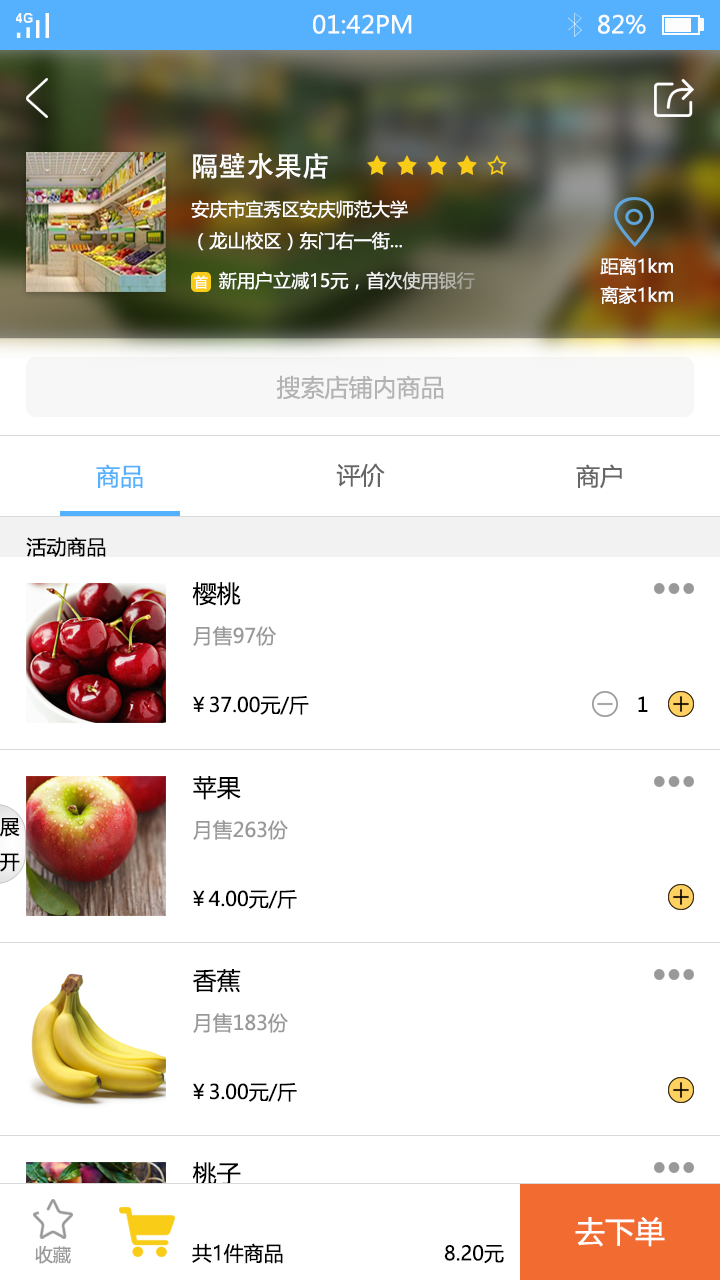
<style>
.page{position:relative;width:720px;height:1280px;background:#ffffff}
.page>*{position:absolute;margin:0}
.t1{font:24px "MicrosoftYaHei";color:#fbfdfc}
.t2{font:27.7px "AdobeHeitiStd-Regular";color:#ffffff}
.t3{font:18px "MicrosoftYaHei";color:#ffffff}
.t4{font:18.1px "MicrosoftYaHei";color:#ffffff}
.t5{font:13.8px "MicrosoftYaHei";color:#ffffff}
.t6{font:24px "MicrosoftYaHei";color:#b3b3b3}
.t7{font:24px "MicrosoftYaHei";color:#55b0fe}
.t8{font:24px "MicrosoftYaHei";color:#666666}
.t9{font:20px "MicrosoftYaHei";color:#010101}
.t10{font:24px "MicrosoftYaHei";color:#000000}
.t11{font:20px "MicrosoftYaHei";color:#999999}
.t12{font:20px "MicrosoftYaHei";color:#000000}
.t13{font:30px "MicrosoftYaHei";color:#ffffff}
.t14{font:17.9px "MicrosoftYaHei";color:#999999}
</style>
<div class="page">
<p class="t1" style="left:313px;top:14px;width:99px;height:20px">01:42PM</p>
<p class="t1" style="left:598px;top:14px;width:48px;height:20px">82%</p>
<p class="t2" style="left:193px;top:153px;width:135px;height:26px">隔壁水果店</p>
<p class="t3" style="left:191px;top:200px;width:217px;height:51px">安庆市宜秀区安庆师范大学<br>（龙山校区）东门右一街...</p>
<p class="t4" style="left:600px;top:257px;width:73px;height:18px">距离1km</p>
<p class="t5" style="left:194px;top:275px;width:14px;height:14px">首</p>
<p class="t3" style="left:219px;top:271px;width:256px;height:19px">新用户立减15元，首次使用银行</p>
<p class="t4" style="left:600px;top:286px;width:73px;height:18px">离家1km</p>
<p class="t6" style="left:277px;top:375px;width:167px;height:25px">搜索店铺内商品</p>
<p class="t7" style="left:96px;top:464px;width:47px;height:24px">商品</p>
<p class="t8" style="left:336px;top:463px;width:49px;height:25px">评价</p>
<p class="t8" style="left:576px;top:464px;width:46px;height:25px">商户</p>
<p class="t9" style="left:26px;top:537px;width:80px;height:20px">活动商品</p>
<p class="t10" style="left:192px;top:582px;width:49px;height:24px">樱桃</p>
<p class="t11" style="left:193px;top:626px;width:83px;height:20px">月售97份</p>
<p class="t12" style="left:193px;top:696px;width:116px;height:19px">￥37.00元/斤</p>
<p class="t12" style="left:638px;top:696px;width:10px;height:16px">1</p>
<p class="t10" style="left:193px;top:776px;width:48px;height:24px">苹果</p>
<p class="t12" style="left:0px;top:818px;width:20px;height:54px">展<br>开</p>
<p class="t11" style="left:193px;top:820px;width:95px;height:20px">月售263份</p>
<p class="t12" style="left:193px;top:890px;width:104px;height:19px">￥4.00元/斤</p>
<p class="t10" style="left:193px;top:969px;width:48px;height:24px">香蕉</p>
<p class="t11" style="left:193px;top:1013px;width:95px;height:20px">月售183份</p>
<p class="t12" style="left:193px;top:1083px;width:104px;height:19px">￥3.00元/斤</p>
<p class="t10" style="left:192px;top:1162px;width:49px;height:24px">桃子</p>
<p class="t13" style="left:575px;top:1217px;width:90px;height:30px">去下单</p>
<p class="t14" style="left:35px;top:1246px;width:36px;height:18px">收藏</p>
<p class="t12" style="left:192px;top:1243px;width:91px;height:21px">共1件商品</p>
<p class="t12" style="left:444px;top:1245px;width:60px;height:19px">8.20元</p>
</div>
